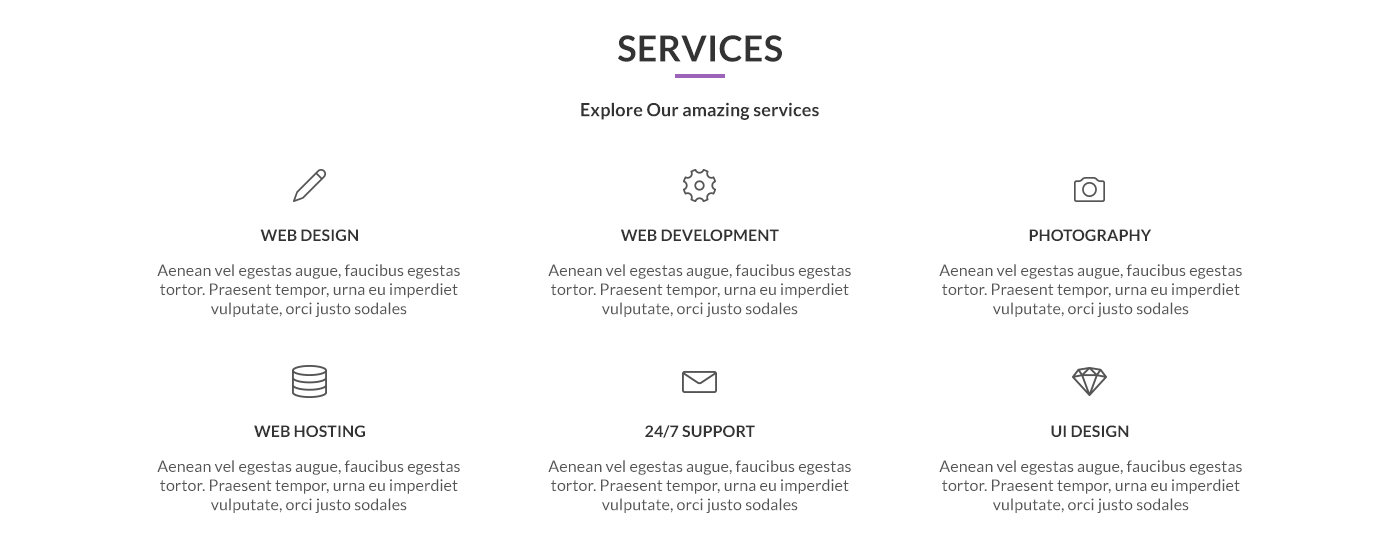
<style>
.page{position:relative;width:1400px;height:560px;background:#ffffff}
.page>*{position:absolute;margin:0}
.t1{font:36px "Lato-Bold";letter-spacing:0.005em;color:#333333}
.t2{font:18px "Lato-Bold";letter-spacing:0.005em;color:#333333}
.t3{font:16px "Lato-Bold";letter-spacing:0.005em;color:#333333}
.t4{font:16px "Lato-Regular";letter-spacing:0.005em;color:#555555}
</style>
<div class="page">
<p class="t1" style="left:618px;top:35px;width:164px;height:27px">SERVICES</p>
<p class="t2" style="left:581px;top:102px;width:238px;height:18px">Explore Our amazing services</p>
<p class="t3" style="left:260px;top:229px;width:98px;height:12px">WEB DESIGN</p>
<p class="t3" style="left:621px;top:229px;width:158px;height:12px">WEB DEVELOPMENT</p>
<p class="t3" style="left:1029px;top:229px;width:123px;height:12px">PHOTOGRAPHY</p>
<p class="t4" style="left:157px;top:264px;width:303px;height:53px;text-align:center">Aenean vel egestas augue, faucibus egestas tortor. Praesent tempor, urna eu imperdiet vulputate, orci justo sodales</p>
<p class="t4" style="left:548px;top:264px;width:303px;height:53px;text-align:center">Aenean vel egestas augue, faucibus egestas tortor. Praesent tempor, urna eu imperdiet vulputate, orci justo sodales</p>
<p class="t4" style="left:939px;top:264px;width:303px;height:53px;text-align:center">Aenean vel egestas augue, faucibus egestas tortor. Praesent tempor, urna eu imperdiet vulputate, orci justo sodales</p>
<p class="t3" style="left:254px;top:425px;width:111px;height:12px">WEB HOSTING</p>
<p class="t3" style="left:645px;top:425px;width:110px;height:13px">24/7 SUPPORT</p>
<p class="t3" style="left:1051px;top:425px;width:78px;height:12px">UI DESIGN</p>
<p class="t4" style="left:157px;top:460px;width:303px;height:53px;text-align:center">Aenean vel egestas augue, faucibus egestas tortor. Praesent tempor, urna eu imperdiet vulputate, orci justo sodales</p>
<p class="t4" style="left:548px;top:460px;width:303px;height:53px;text-align:center">Aenean vel egestas augue, faucibus egestas tortor. Praesent tempor, urna eu imperdiet vulputate, orci justo sodales</p>
<p class="t4" style="left:939px;top:460px;width:303px;height:53px;text-align:center">Aenean vel egestas augue, faucibus egestas tortor. Praesent tempor, urna eu imperdiet vulputate, orci justo sodales</p>
</div>
